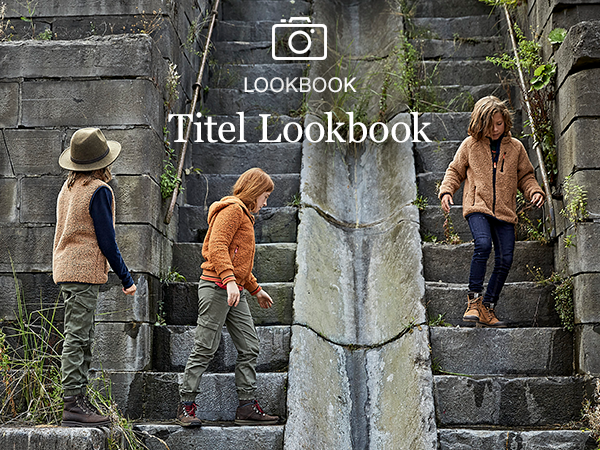
<style>
.page{position:relative;width:600px;height:450px}
.page>*{position:absolute;margin:0}
.t1{font:40px/49.6px "Georgia";color:#ffffff}
.t2{font:20px/24px "ArialMT";color:#ffffff;text-transform:uppercase}
</style>
<div class="page">
<p class="t1" style="left:168px;top:77px;width:264px;height:66px;text-align:center"><span class="t2">LOOKBOOK<br></span>Titel Lookbook</p>
</div>
